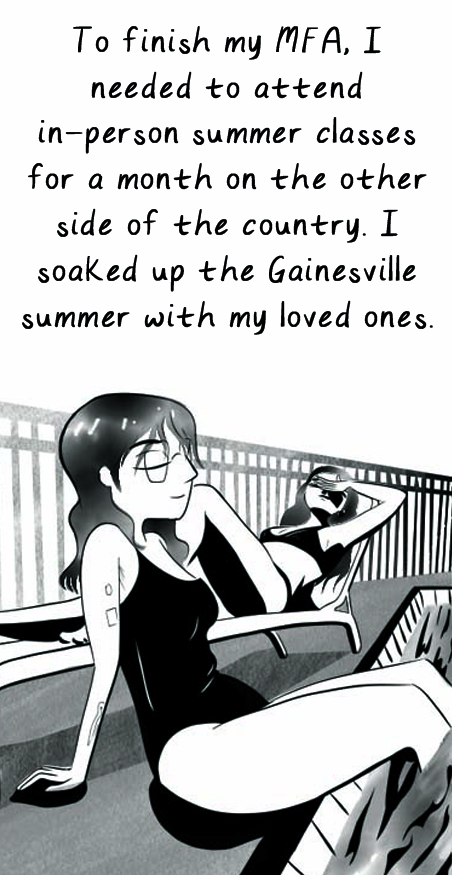
<style>
.page{position:relative;width:452px;height:875px;background:#fefefe}
.page>*{position:absolute;margin:0}
.t1{font:41.7px/45.8px "Updatedcarlyfont-Regular";color:#000000;font-weight:bold}
</style>
<div class="page">
<p class="t1" style="left:22px;top:26px;width:411px;height:309px;text-align:center">To finish my MFA, I needed to attend in-person summer classes for a month on the other side of the country. I soaked up the Gainesville summer with my loved ones.</p>
</div>
